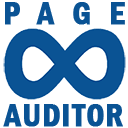
<style>
.page{position:relative;width:128px;height:128px;background:#ffffff}
.page>*{position:absolute;margin:0}
.t1{font:32px "FranklinGothic-DemiCond";letter-spacing:0.56em;color:#0a5394;text-transform:uppercase;font-weight:bold}
.t2{font:32px "FranklinGothic-DemiCond";letter-spacing:0.02em;color:#0a5394;text-transform:uppercase;font-weight:bold}
</style>
<div class="page">
<p class="t1" style="left:5px;top:2px;width:120px;height:23px">Page</p>
<p class="t2" style="left:3px;top:104px;width:120px;height:23px">AUDITOR</p>
</div>
